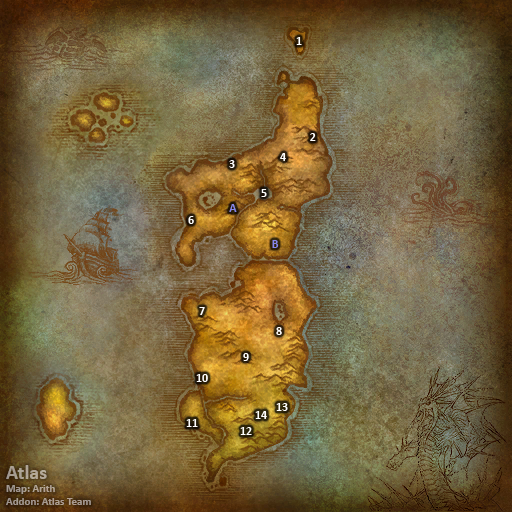
<style>
.page{position:relative;width:512px;height:512px}
.page>*{position:absolute;margin:0}
.t1{font:12px "Calibri-Bold";color:#ffffff}
.t2{font:12px "Calibri-Bold";color:#8788ee}
.t3{font:11px "Calibri-Bold";color:#aca092}
.t4{font:20px "Calibri-Bold";color:#aca092}
</style>
<div class="page">
<p class="t1" style="left:296px;top:37px;width:6px;height:8px">1</p>
<p class="t1" style="left:310px;top:133px;width:6px;height:8px">2</p>
<p class="t1" style="left:229px;top:160px;width:6px;height:8px">3</p>
<p class="t1" style="left:280px;top:153px;width:6px;height:8px">4</p>
<p class="t1" style="left:261px;top:189px;width:6px;height:8px">5</p>
<p class="t2" style="left:229px;top:204px;width:8px;height:8px">A</p>
<p class="t1" style="left:188px;top:216px;width:6px;height:8px">6</p>
<p class="t2" style="left:272px;top:240px;width:7px;height:8px">B</p>
<p class="t1" style="left:199px;top:307px;width:6px;height:8px">7</p>
<p class="t1" style="left:276px;top:327px;width:6px;height:8px">8</p>
<p class="t1" style="left:243px;top:353px;width:6px;height:8px">9</p>
<p class="t1" style="left:196px;top:374px;width:12px;height:8px">10</p>
<p class="t1" style="left:255px;top:411px;width:12px;height:8px">14</p>
<p class="t1" style="left:276px;top:403px;width:12px;height:8px">13</p>
<p class="t1" style="left:186px;top:419px;width:12px;height:8px">11</p>
<p class="t1" style="left:240px;top:427px;width:12px;height:8px">12</p>
<p class="t3" style="left:6px;top:465px;width:85px;height:40px"><span class="t4">Atlas<br></span>Map: Arith<br>Addon: Atlas Team</p>
</div>
